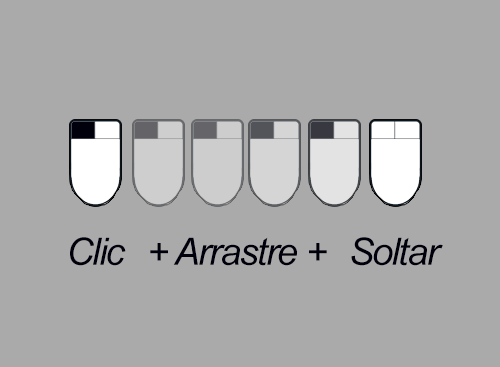
<style>
.page{position:relative;width:500px;height:367px;background:#aaaaaa}
.page>*{position:absolute;margin:0}
.t1{font:37.7px "Arial-ItalicMT";letter-spacing:-0.04em;color:#00000d}
</style>
<div class="page">
<p class="t1" style="left:70px;top:237px;width:56px;height:29px">Clic</p>
<p class="t1" style="left:150px;top:237px;width:177px;height:29px">+ Arrastre +</p>
<p class="t1" style="left:351px;top:237px;width:92px;height:29px">Soltar</p>
</div>
